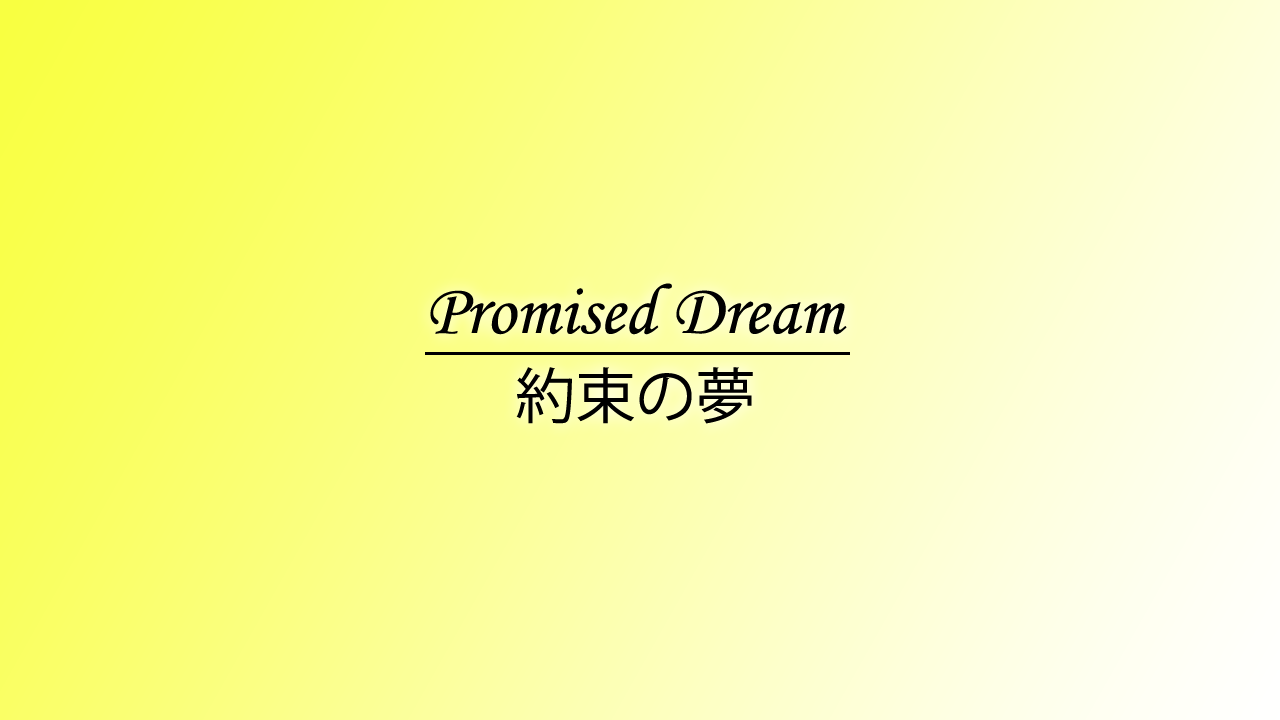
<style>
.page{position:relative;width:1280px;height:720px}
.page>*{position:absolute;margin:0}
.t1{font:72px "MonotypeCorsiva";color:#000000}
.t2{font:60px "KozGoPr6N-Regular";color:#000000}
.t3{font:72px "KozGoPr6N-Regular";color:#000000}
</style>
<div class="page">
<p class="t1" style="left:430px;top:283px;width:417px;height:52px">Promised Dream</p>
<p class="t2" style="left:516px;top:367px;width:237px;height:57px"><span class="t3"><br></span>約束の夢</p>
</div>
